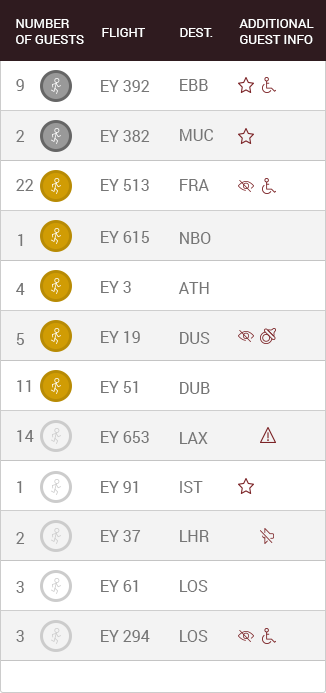
<style>
.page{position:relative;width:326px;height:693px;background:#ffffff}
.page>*{position:absolute;margin:0}
.t1{font:13px "Roboto-Regular";color:#ffffff;text-transform:uppercase}
.t2{font:16px "Roboto-Regular";color:#767676}
</style>
<div class="page">
<p class="t1" style="left:16px;top:19px;width:68px;height:25px">Number<br>of Guests</p>
<p class="t1" style="left:102px;top:28px;width:43px;height:9px">Flight</p>
<p class="t1" style="left:180px;top:28px;width:33px;height:9px">Dest.</p>
<p class="t1" style="left:239px;top:19px;width:75px;height:25px">Additional<br>Guest Info</p>
<p class="t2" style="left:16px;top:79px;width:8px;height:12px">9</p>
<p class="t2" style="left:101px;top:80px;width:49px;height:12px">EY 392</p>
<p class="t2" style="left:180px;top:79px;width:28px;height:12px">EBB</p>
<p class="t2" style="left:16px;top:130px;width:9px;height:12px">2</p>
<p class="t2" style="left:101px;top:130px;width:49px;height:12px">EY 382</p>
<p class="t2" style="left:180px;top:129px;width:33px;height:12px">MUC</p>
<p class="t2" style="left:16px;top:179px;width:18px;height:12px">22</p>
<p class="t2" style="left:101px;top:179px;width:48px;height:12px">EY 513</p>
<p class="t2" style="left:180px;top:179px;width:29px;height:12px">FRA</p>
<p class="t2" style="left:101px;top:231px;width:48px;height:12px">EY 615</p>
<p class="t2" style="left:180px;top:232px;width:31px;height:12px">NBO</p>
<p class="t2" style="left:18px;top:234px;width:5px;height:12px">1</p>
<p class="t2" style="left:101px;top:281px;width:30px;height:12px">EY 3</p>
<p class="t2" style="left:16px;top:283px;width:9px;height:12px">4</p>
<p class="t2" style="left:178px;top:282px;width:31px;height:12px">ATH</p>
<p class="t2" style="left:16px;top:333px;width:8px;height:12px">5</p>
<p class="t2" style="left:101px;top:331px;width:39px;height:12px">EY 19</p>
<p class="t2" style="left:180px;top:332px;width:30px;height:12px">DUS</p>
<p class="t2" style="left:17px;top:380px;width:14px;height:12px">11</p>
<p class="t2" style="left:101px;top:381px;width:37px;height:12px">EY 51</p>
<p class="t2" style="left:180px;top:382px;width:30px;height:12px">DUB</p>
<p class="t2" style="left:17px;top:430px;width:17px;height:12px">14</p>
<p class="t2" style="left:101px;top:431px;width:48px;height:12px">EY 653</p>
<p class="t2" style="left:180px;top:432px;width:28px;height:12px">LAX</p>
<p class="t2" style="left:17px;top:481px;width:5px;height:12px">1</p>
<p class="t2" style="left:101px;top:481px;width:37px;height:12px">EY 91</p>
<p class="t2" style="left:180px;top:481px;width:23px;height:12px">IST</p>
<p class="t2" style="left:16px;top:532px;width:9px;height:12px">2</p>
<p class="t2" style="left:101px;top:530px;width:40px;height:12px">EY 37</p>
<p class="t2" style="left:180px;top:530px;width:29px;height:12px">LHR</p>
<p class="t2" style="left:16px;top:581px;width:8px;height:12px">3</p>
<p class="t2" style="left:101px;top:580px;width:37px;height:12px">EY 61</p>
<p class="t2" style="left:180px;top:580px;width:28px;height:12px">LOS</p>
<p class="t2" style="left:16px;top:630px;width:8px;height:12px">3</p>
<p class="t2" style="left:101px;top:630px;width:49px;height:12px">EY 294</p>
<p class="t2" style="left:180px;top:630px;width:28px;height:12px">LOS</p>
</div>
